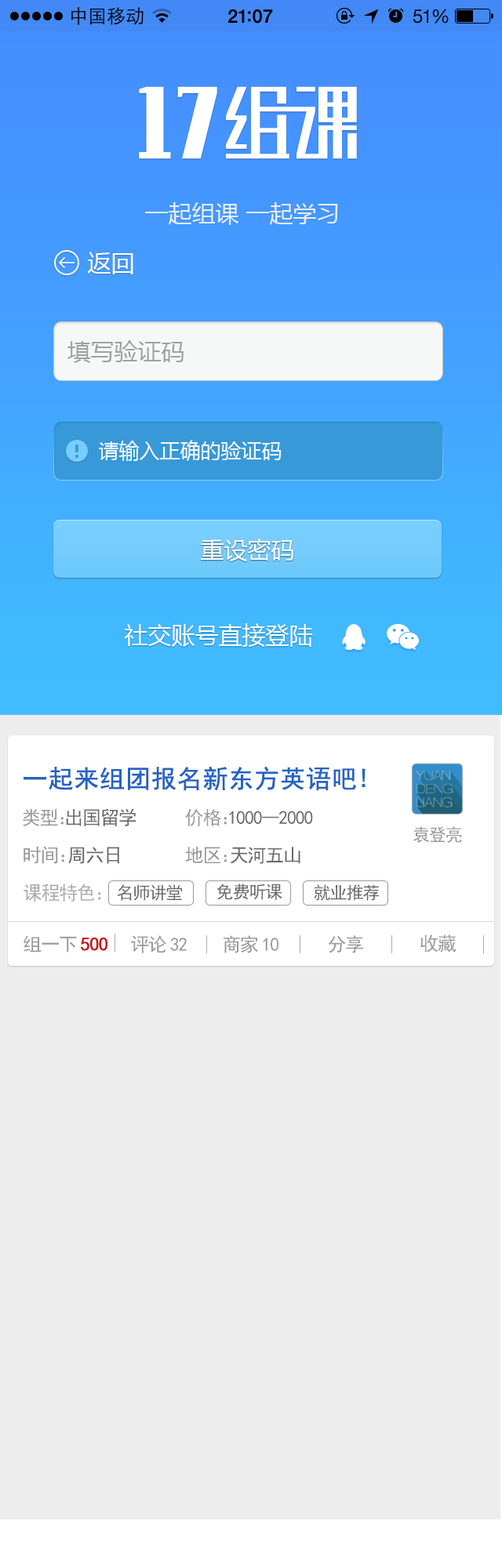
<style>
.page{position:relative;width:502px;height:1568px;background:#ededed}
.page>*{position:absolute;margin:0}
.t1{font:23.5px "MicrosoftYaHei";color:#ededed}
.t2{font:23.5px "MicrosoftYaHei";color:#fefefe}
.t3{font:23.5px "MicrosoftYaHei";color:#a1a1a1}
.t4{font:20.4px "MicrosoftYaHei";color:#f6f8f8}
.t5{font:25.1px "SimHei";color:#2463c5;font-weight:bold}
.t6{font:18.8px "SimHei";letter-spacing:-0.05em;color:#696969}
.t7{font:18.8px "SimHei";letter-spacing:-0.05em;color:#999999}
.t8{font:18.8px "SimHei";letter-spacing:-0.62em;color:#999999}
.t9{font:17.2px "SimHei";letter-spacing:-0.05em;color:#999999}
.t10{font:18.8px "SimHei";letter-spacing:-0.5em;color:#999999}
.t11{font:18.8px "SimHei";letter-spacing:-0.52em;color:#999999}
.t12{font:18.8px "SimHei";letter-spacing:-0.05em;color:#acacac}
.t13{font:18.8px "SimHei";color:#acacac}
.t14{font:17.2px "SimHei";letter-spacing:-0.05em;color:#696969}
.t15{font:18.8px "SimHei";letter-spacing:-0.05em;color:#c61414;font-weight:bold}
.t16{font:18.8px "SimHei";letter-spacing:0.15em;color:#999999}
</style>
<div class="page">
<p class="t1" style="left:145px;top:202px;width:193px;height:23px">一起组课 一起学习</p>
<p class="t2" style="left:88px;top:252px;width:45px;height:22px">返回</p>
<p class="t3" style="left:67px;top:340px;width:116px;height:23px">填写验证码</p>
<p class="t4" style="left:99px;top:440px;width:182px;height:21px">请输入正确的验证码</p>
<p class="t2" style="left:201px;top:539px;width:92px;height:22px">重设密码</p>
<p class="t2" style="left:125px;top:623px;width:188px;height:24px">社交账号直接登陆</p>
<p class="t5" style="left:24px;top:766px;width:341px;height:24px">一起来组团报名新东方英语吧!</p>
<p class="t6" style="left:23px;top:808px;width:113px;height:18px"><span class="t7">类型</span><span class="t8">：</span>出国留学</p>
<p class="t6" style="left:185px;top:808px;width:128px;height:18px"><span class="t7">价格</span><span class="t8">：</span>1000--2000</p>
<p class="t9" style="left:412px;top:826px;width:50px;height:17px">袁登亮</p>
<p class="t6" style="left:24px;top:846px;width:95px;height:18px"><span class="t7">时间</span><span class="t10">：</span>周六日</p>
<p class="t6" style="left:185px;top:846px;width:115px;height:18px"><span class="t7">地区</span><span class="t11">：</span>天河五山</p>
<p class="t12" style="left:24px;top:884px;width:77px;height:18px">课程特色<span class="t13">：</span></p>
<p class="t14" style="left:117px;top:884px;width:66px;height:17px">名师讲堂</p>
<p class="t14" style="left:216px;top:884px;width:66px;height:16px">免费听课</p>
<p class="t14" style="left:314px;top:884px;width:65px;height:17px">就业推荐</p>
<p class="t15" style="left:24px;top:935px;width:83px;height:18px"><span class="t7">组一</span><span class="t16">下</span>500</p>
<p class="t7" style="left:131px;top:935px;width:56px;height:18px">评<span class="t16">论</span>32</p>
<p class="t7" style="left:223px;top:935px;width:55px;height:18px">商<span class="t16">家</span>10</p>
<p class="t7" style="left:328px;top:935px;width:36px;height:18px">分享</p>
<p class="t7" style="left:420px;top:935px;width:36px;height:18px">收藏</p>
</div>
